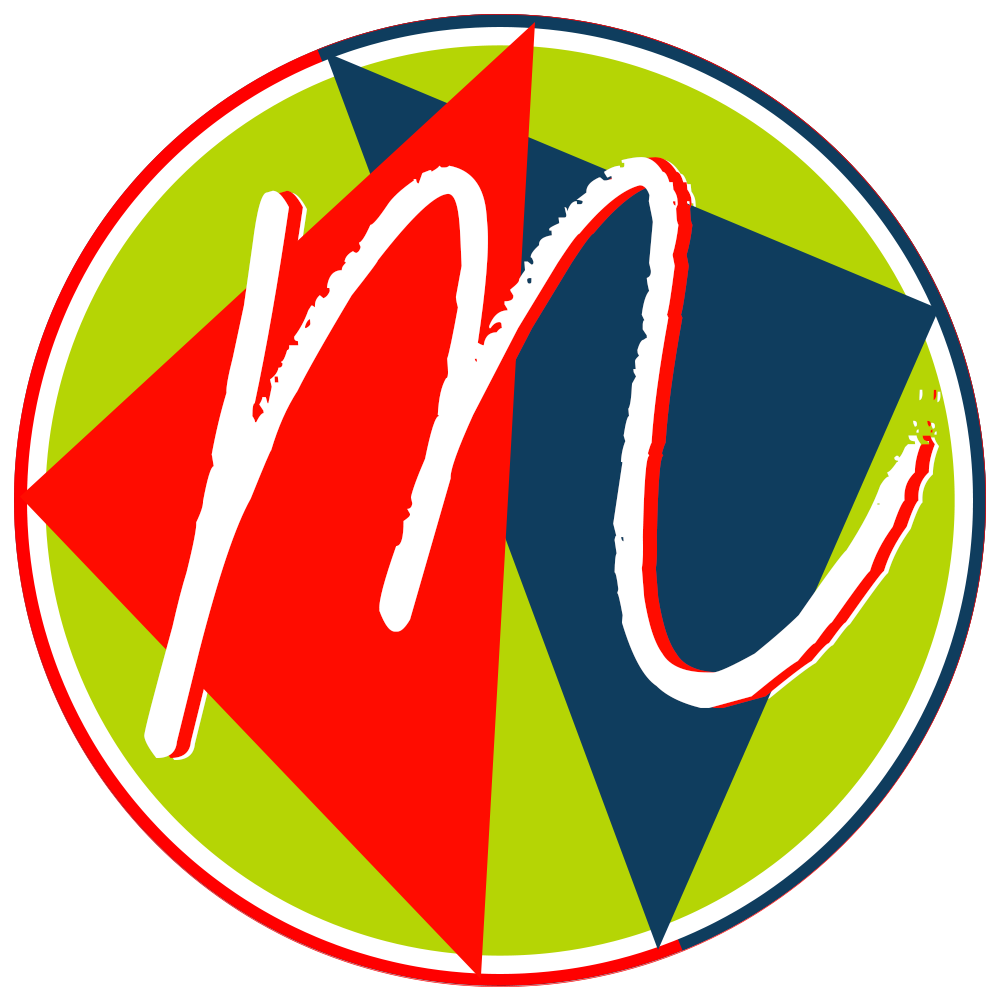
<style>
.page{position:relative;width:1000px;height:1000px;background:#ffffff}
.page>*{position:absolute;margin:0}
.t1{font:884.2px "Beauty";letter-spacing:0.06em;color:#ffffff;text-transform:uppercase;scale:0.78 1}
.t2{font:884.2px "Beauty";letter-spacing:0.06em;text-transform:uppercase;scale:0.78 1}
</style>
<div class="page">
<p class="t1" style="left:144px;top:157px;width:779px;height:601px">M</p>
<p class="t2" style="left:158px;top:157px;width:779px;height:601px">M</p>
</div>
